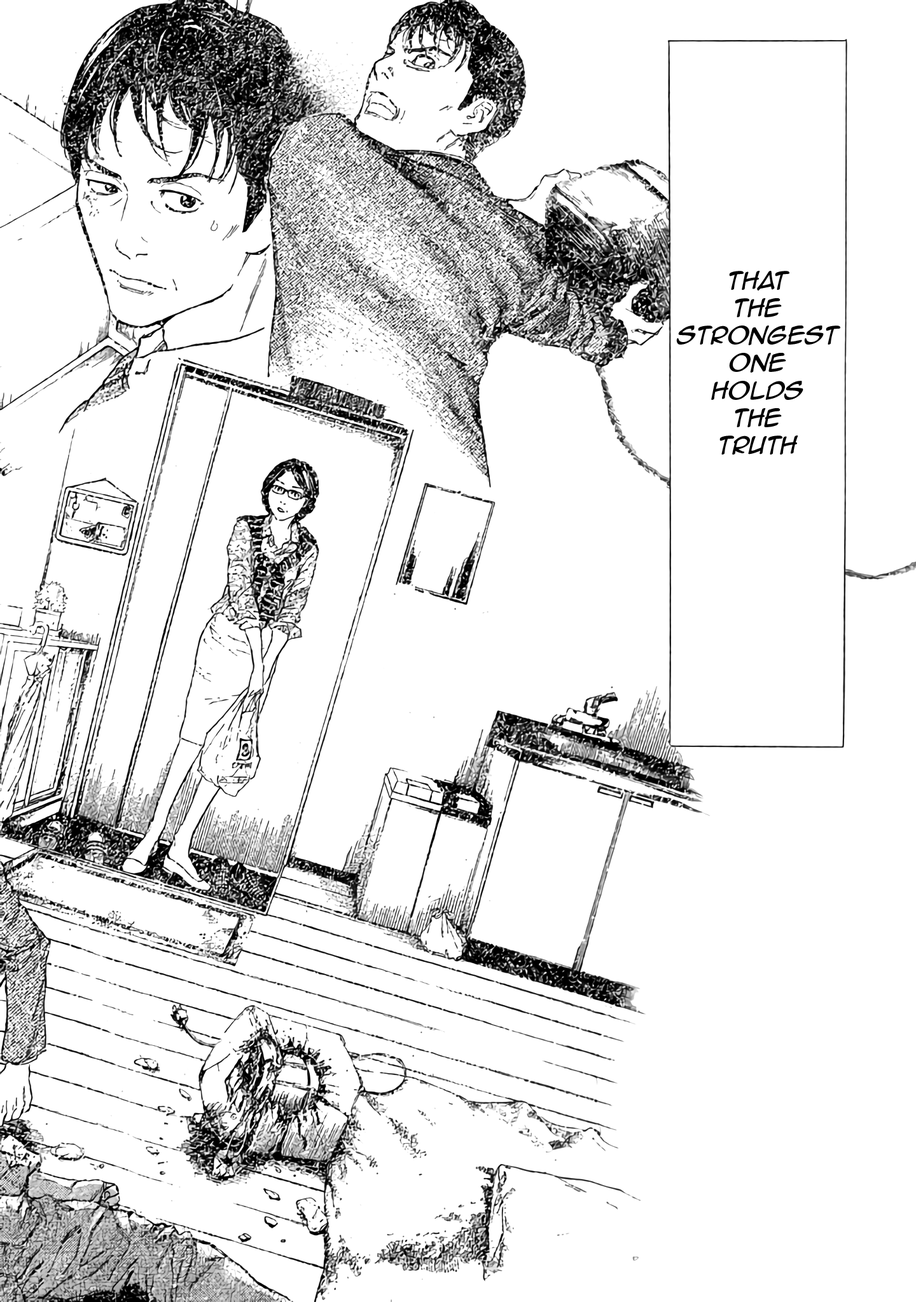
<style>
.page{position:relative;width:916px;height:1302px;background:#ffffff}
.page>*{position:absolute;margin:0}
.t1{font:22.9px "AnimeAce2.0BB-Italic";color:#000000}
</style>
<div class="page">
<p class="t1" style="left:676px;top:271px;width:164px;height:184px;text-align:center">That<br>The<br>Strongest<br>one<br>Holds<br>the<br>truth</p>
</div>
